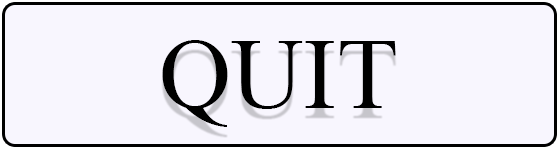
<style>
.page{position:relative;width:559px;height:149px;background:#f8f6fe}
.page>*{position:absolute;margin:0}
.t1{font:100px "TimesNewRomanPSMT";color:#000000}
</style>
<div class="page">
<p class="t1" style="left:162px;top:40px;width:234px;height:87px">QUIT</p>
</div>
